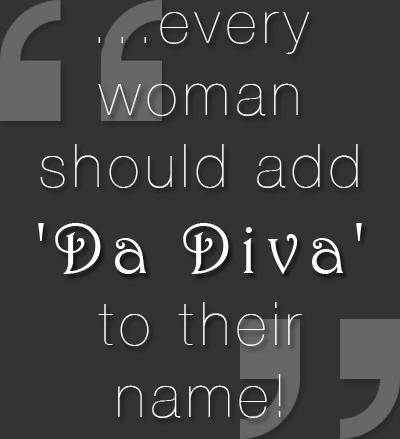
<style>
.page{position:relative;width:400px;height:439px;background:#333333}
.page>*{position:absolute;margin:0}
.t1{font:60px "HelveticaNeue-UltraLight";letter-spacing:0.1em;color:#ffffff}
.t2{font:72px "Harrington";letter-spacing:0.1em;color:#ffffff}
</style>
<div class="page">
<p class="t1" style="left:38px;top:12px;width:324px;height:406px;text-align:center">...every woman should add <br><span class="t2">'Da Diva' <br></span>to their name!</p>
</div>
